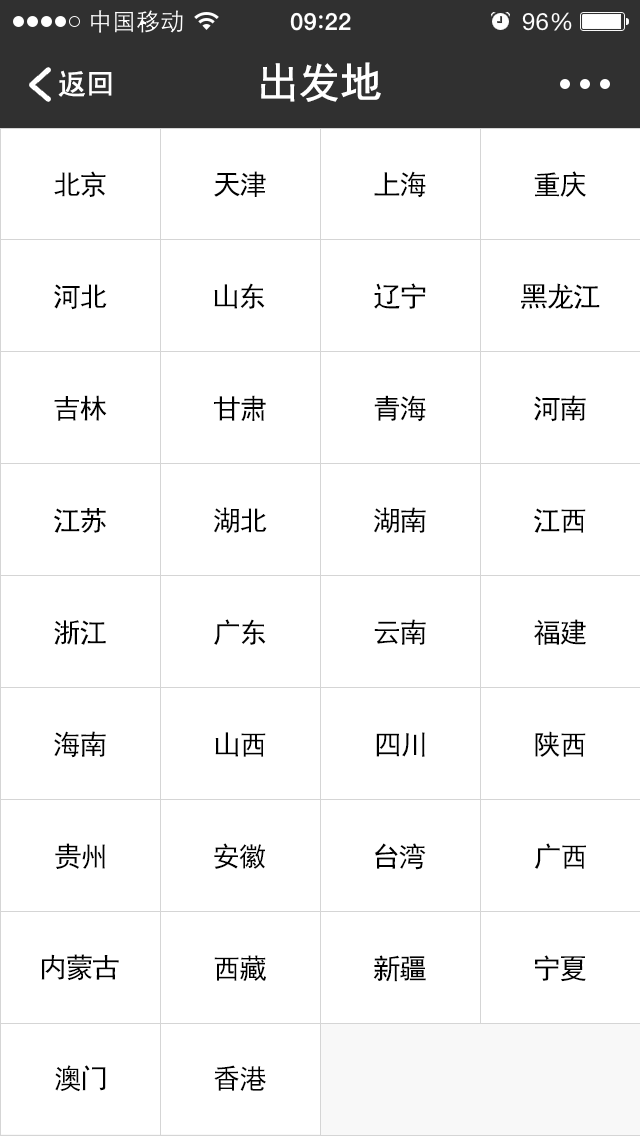
<style>
.page{position:relative;width:640px;height:1136px;background:#ffffff}
.page>*{position:absolute;margin:0}
.t1{font:42px "SimHei";letter-spacing:-0.04em;color:#ffffff;font-weight:bold}
.t2{font:28px "SimHei";color:#ffffff;font-weight:bold}
.t3{font:27.7px "SimHei";letter-spacing:-0.04em;color:#000000}
</style>
<div class="page">
<p class="t1" style="left:261px;top:62px;width:120px;height:40px">出发地</p>
<p class="t2" style="left:58px;top:70px;width:54px;height:27px">返回</p>
<p class="t3" style="left:54px;top:171px;width:52px;height:26px">北京</p>
<p class="t3" style="left:214px;top:171px;width:52px;height:26px">天津</p>
<p class="t3" style="left:374px;top:171px;width:52px;height:27px">上海</p>
<p class="t3" style="left:534px;top:171px;width:52px;height:26px">重庆</p>
<p class="t3" style="left:54px;top:284px;width:53px;height:26px">河北</p>
<p class="t3" style="left:214px;top:283px;width:51px;height:26px">山东</p>
<p class="t3" style="left:374px;top:283px;width:52px;height:26px">辽宁</p>
<p class="t3" style="left:521px;top:283px;width:79px;height:26px">黑龙江</p>
<p class="t3" style="left:54px;top:395px;width:53px;height:26px">吉林</p>
<p class="t3" style="left:214px;top:395px;width:52px;height:26px">甘肃</p>
<p class="t3" style="left:374px;top:395px;width:52px;height:27px">青海</p>
<p class="t3" style="left:534px;top:395px;width:52px;height:27px">河南</p>
<p class="t3" style="left:54px;top:508px;width:52px;height:25px">江苏</p>
<p class="t3" style="left:214px;top:507px;width:53px;height:27px">湖北</p>
<p class="t3" style="left:374px;top:507px;width:52px;height:27px">湖南</p>
<p class="t3" style="left:534px;top:508px;width:52px;height:25px">江西</p>
<p class="t3" style="left:54px;top:620px;width:52px;height:25px">浙江</p>
<p class="t3" style="left:214px;top:619px;width:52px;height:26px">广东</p>
<p class="t3" style="left:374px;top:619px;width:52px;height:26px">云南</p>
<p class="t3" style="left:534px;top:619px;width:52px;height:26px">福建</p>
<p class="t3" style="left:54px;top:731px;width:52px;height:27px">海南</p>
<p class="t3" style="left:215px;top:732px;width:51px;height:25px">山西</p>
<p class="t3" style="left:376px;top:732px;width:49px;height:25px">四川</p>
<p class="t3" style="left:535px;top:731px;width:51px;height:26px">陕西</p>
<p class="t3" style="left:55px;top:843px;width:50px;height:26px">贵州</p>
<p class="t3" style="left:214px;top:843px;width:51px;height:26px">安徽</p>
<p class="t3" style="left:374px;top:843px;width:52px;height:27px">台湾</p>
<p class="t3" style="left:534px;top:843px;width:52px;height:26px">广西</p>
<p class="t3" style="left:41px;top:954px;width:78px;height:27px">内蒙古</p>
<p class="t3" style="left:214px;top:955px;width:52px;height:26px">西藏</p>
<p class="t3" style="left:373px;top:955px;width:53px;height:27px">新疆</p>
<p class="t3" style="left:535px;top:955px;width:51px;height:27px">宁夏</p>
<p class="t3" style="left:55px;top:1065px;width:51px;height:27px">澳门</p>
<p class="t3" style="left:214px;top:1065px;width:52px;height:26px">香港</p>
</div>
